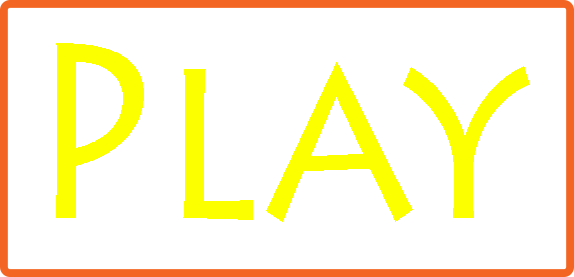
<style>
.page{position:relative;width:574px;height:277px;background:#ffffff}
.page>*{position:absolute;margin:0}
.t1{font:250.9px "LithosPro-Regular";color:#fcff00;scale:0.86 1}
</style>
<div class="page">
<p class="t1" style="left:56px;top:43px;width:474px;height:179px">Play</p>
</div>
